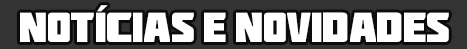
<style>
.page{position:relative;width:467px;height:49px;background:#ffffff}
.page>*{position:absolute;margin:0}
.t1{font:35px "DeadpoolMovie";color:#ffffff}
</style>
<div class="page">
<p class="t1" style="left:20px;top:5px;width:429px;height:37px">NOTÍCIAS E NOVIDADES</p>
</div>
